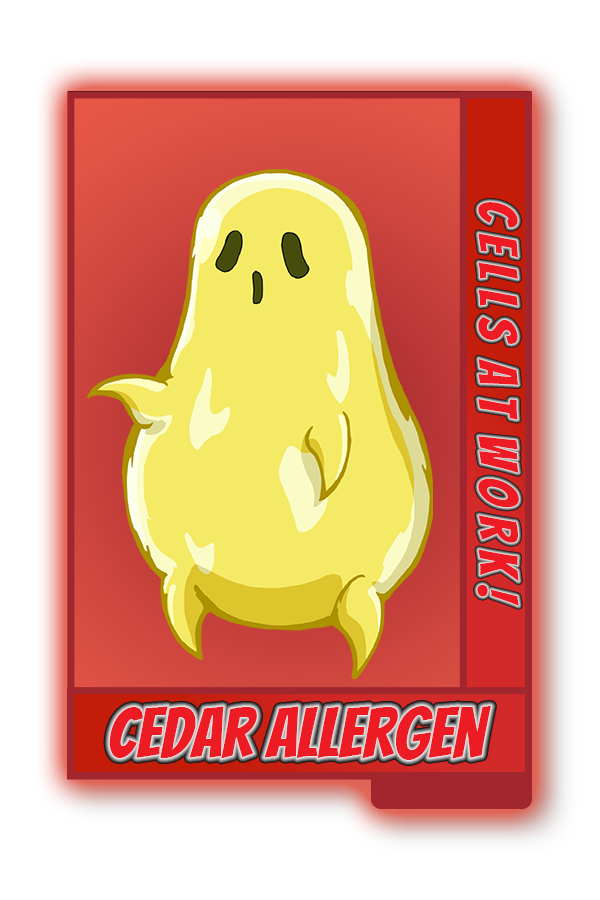
<style>
.page{position:relative;width:600px;height:900px;background:#ffffff}
.page>*{position:absolute;margin:0}
.t1{font:54px "Bangers-Regular";color:#ed1c24}
.t2{font:70px "Bangers-Regular";color:#ed1c24}
</style>
<div class="page">
<p class="t1" style="left:477px;top:202px;width:42px;height:404px;rotate:90deg">C e l l S  A t  W o r k !</p>
<p class="t2" style="left:109px;top:706px;width:382px;height:54px">Cedar allergen</p>
</div>
